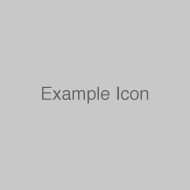
<style>
.page{position:relative;width:190px;height:190px;background:#c8c8c8}
.page>*{position:absolute;margin:0}
.t1{font:18px "Helvetica";color:#646464}
</style>
<div class="page">
<p class="t1" style="left:42px;top:86px;width:107px;height:18px">Example Icon</p>
</div>
